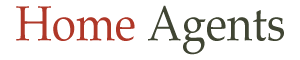
<style>
.page{position:relative;width:300px;height:60px;background:#ffffff}
.page>*{position:absolute;margin:0}
.t1{font:49.3px "BookAntiqua";color:#404533;scale:0.89 1}
.t2{font:49.3px "BookAntiqua";color:#af3728;scale:0.89 1}
</style>
<div class="page">
<p class="t1" style="left:16px;top:5px;width:268px;height:50px"><span class="t2">Home </span>Agents</p>
</div>
